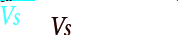
<style>
.page{position:relative;width:179px;height:35px;background:#ffffff}
.page>*{position:absolute;margin:0}
.t1{font:30px "MrsEavesItalic";color:#40ffff}
</style>
<div class="page">
<p class="t1" style="left:0px;top:6px;width:21px;height:19px">Vs</p>
</div>
